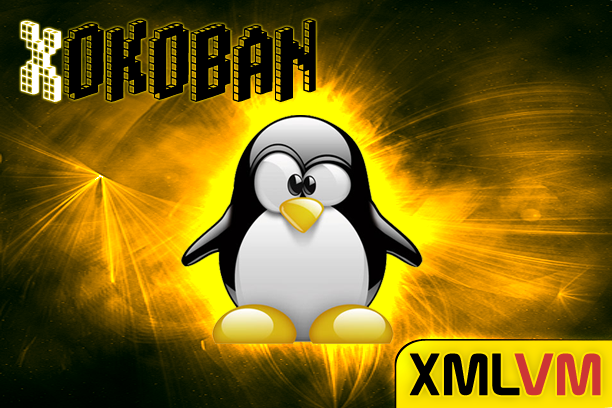
<style>
.page{position:relative;width:612px;height:408px}
.page>*{position:absolute;margin:0}
.t1{font:85.4px "Blox-(BRK";color:#000000}
.t2{font:85.4px "Blox-(BRK";color:#ffffff}
.t3{font:58.2px "Prototype";color:#000000}
.t4{font:58.2px "Prototype";color:#cc3535}
</style>
<div class="page">
<p class="t1" style="left:20px;top:19px;width:296px;height:83px"><span class="t2">X</span>okoban</p>
<p class="t3" style="left:409px;top:353px;width:192px;height:43px">XML<span class="t4">VM</span></p>
</div>
